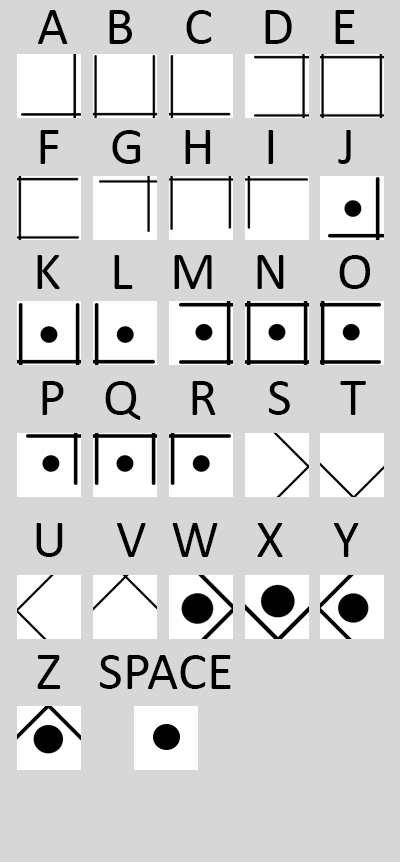
<style>
.page{position:relative;width:400px;height:862px;background:#d7d7d7}
.page>*{position:absolute;margin:0}
.t1{font:54.2px "Calibri";color:#000000}
</style>
<div class="page">
<p class="t1" style="left:37px;top:10px;width:318px;height:34px">A   B    C    D   E</p>
<p class="t1" style="left:40px;top:130px;width:311px;height:34px">F    G   H    I     J</p>
<p class="t1" style="left:37px;top:255px;width:334px;height:34px">K    L   M   N    O</p>
<p class="t1" style="left:42px;top:381px;width:324px;height:39px">P   Q    R    S    T</p>
<p class="t1" style="left:36px;top:523px;width:323px;height:34px">U    V  W   X    Y</p>
<p class="t1" style="left:37px;top:655px;width:194px;height:34px">Z   SPACE</p>
</div>
